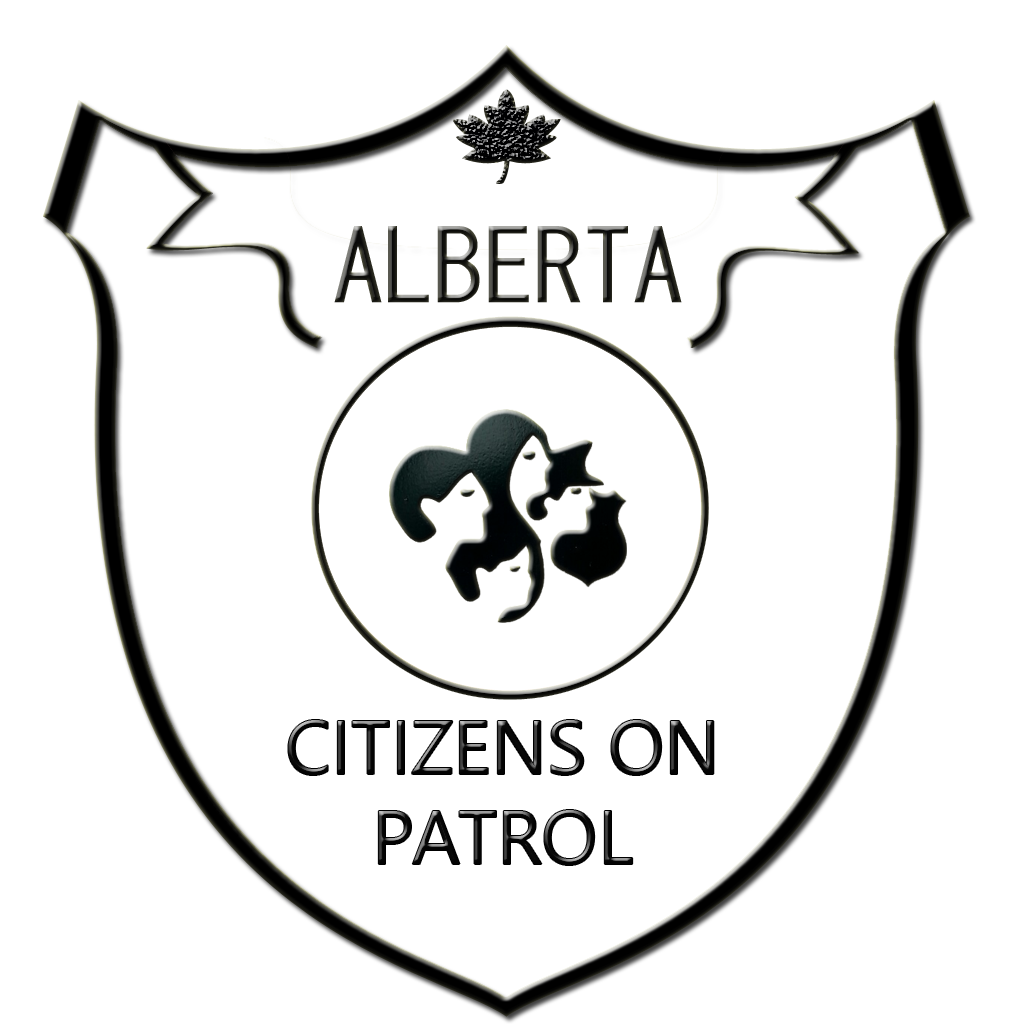
<style>
.page{position:relative;width:1024px;height:1024px;background:#ffffff}
.page>*{position:absolute;margin:0}
.t1{font:100px "MS-Gothic"}
.t2{font:75px "YuGothicUI-Regular";color:#0a0a0a}
</style>
<div class="page">
<p class="t1" style="left:334px;top:226px;width:348px;height:77px">ALBERTA</p>
<p class="t2" style="left:288px;top:720px;width:426px;height:145px;text-align:center">CITIZENS ON <br>PATROL</p>
</div>
